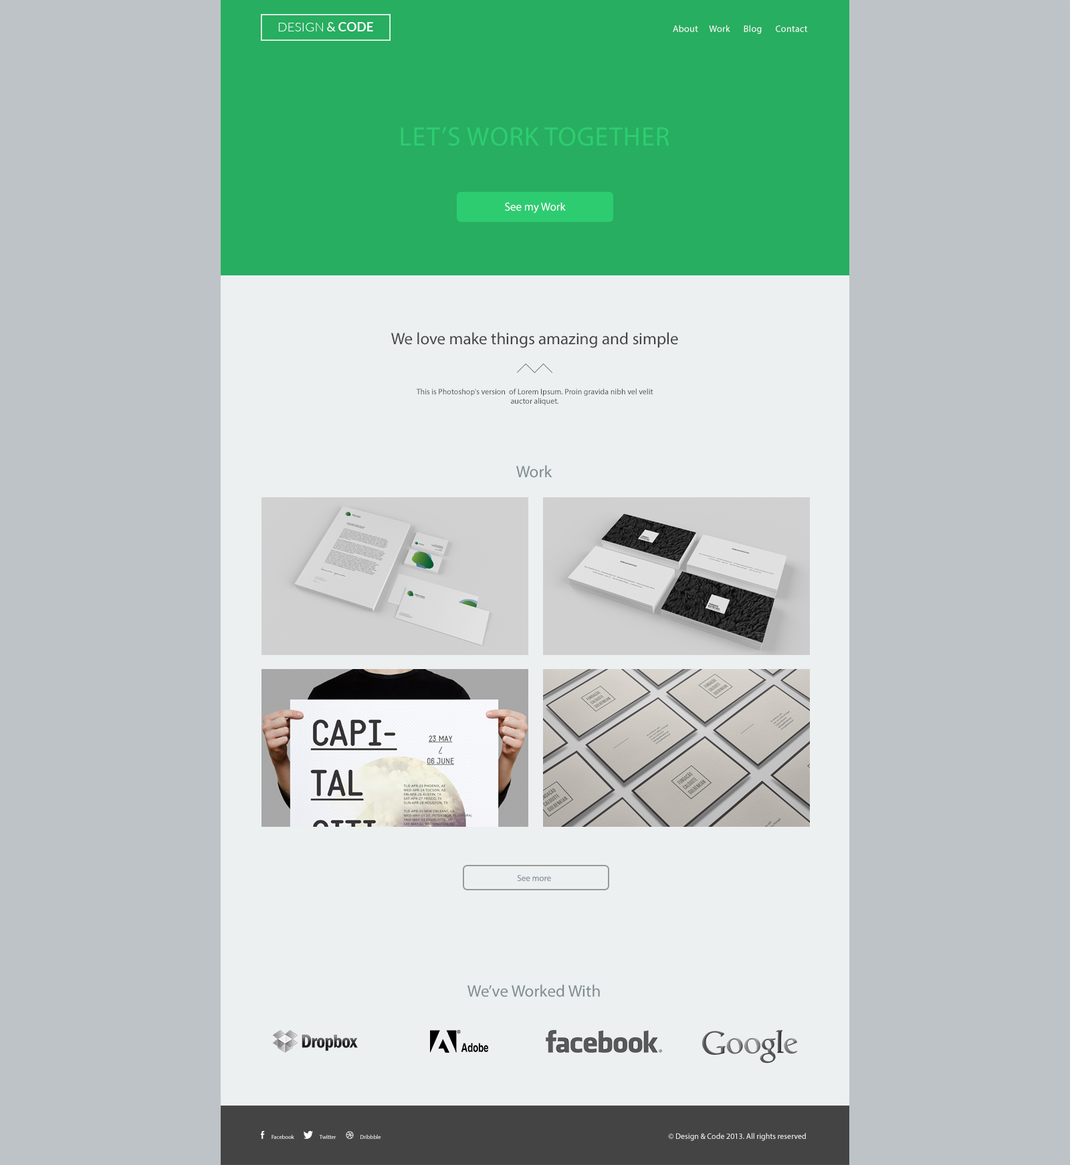
<style>
.page{position:relative;width:1070px;height:1165px;background:#bdc3c7}
.page>*{position:absolute;margin:0}
.t1{font:9.4px "MyriadPro-Regular";letter-spacing:0.025em;color:#f9f9f9}
.t2{font:26.7px "MyriadPro-Regular";letter-spacing:0.025em;color:#2ecc71;text-transform:uppercase}
.t3{font:11.4px "MyriadPro-Regular";color:#ffffff}
.t4{font:16.7px "MyriadPro-Regular";color:#444444}
.t5{font:8px "MyriadPro-Regular";color:#444444}
.t6{font:16.7px "MyriadPro-Regular";color:#7f8c8d}
.t7{font:8.6px "MyriadPro-Regular";color:#9099a3}
.t8{font:8px "MyriadPro-Regular";color:#f9f9f9}
.t9{font:5.8px "MyriadPro-Regular";color:#f9f9f9}
.t10{font:5.8px "MyriadPro-Regular"}
</style>
<div class="page">
<p class="t1" style="left:673px;top:25px;width:134px;height:9px">About     Work      Blog      Contact</p>
<p class="t2" style="left:400px;top:127px;width:269px;height:19px">Let’s Work Together</p>
<p class="t3" style="left:505px;top:203px;width:61px;height:10px">See my Work</p>
<p class="t4" style="left:391px;top:332px;width:287px;height:16px">We love make things amazing and simple</p>
<p class="t5" style="left:416px;top:388px;width:237px;height:18px;text-align:center">This is Photoshop's version  of Lorem Ipsum. Proin gravida nibh vel velit auctor aliquet.</p>
<p class="t6" style="left:516px;top:465px;width:36px;height:13px">Work</p>
<p class="t7" style="left:517px;top:875px;width:34px;height:7px">See more</p>
<p class="t6" style="left:467px;top:985px;width:133px;height:13px">We’ve Worked With</p>
<p class="t8" style="left:668px;top:1133px;width:138px;height:8px">© Design &amp; Code 2013. All rights reserved</p>
<p class="t9" style="left:271px;top:1135px;width:23px;height:4px">Facebook</p>
<p class="t10" style="left:319px;top:1135px;width:17px;height:4px">Twitter</p>
<p class="t9" style="left:360px;top:1135px;width:21px;height:4px">Dribbble</p>
</div>
